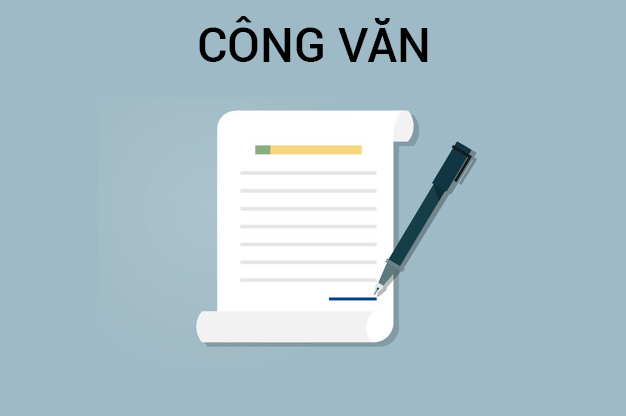
<style>
.page{position:relative;width:626px;height:416px;background:#9ebac6}
.page>*{position:absolute;margin:0}
.t1{font:48px "Roboto-Medium";color:#000000}
</style>
<div class="page">
<p class="t1" style="left:199px;top:16px;width:229px;height:46px">CÔNG VĂN</p>
</div>
